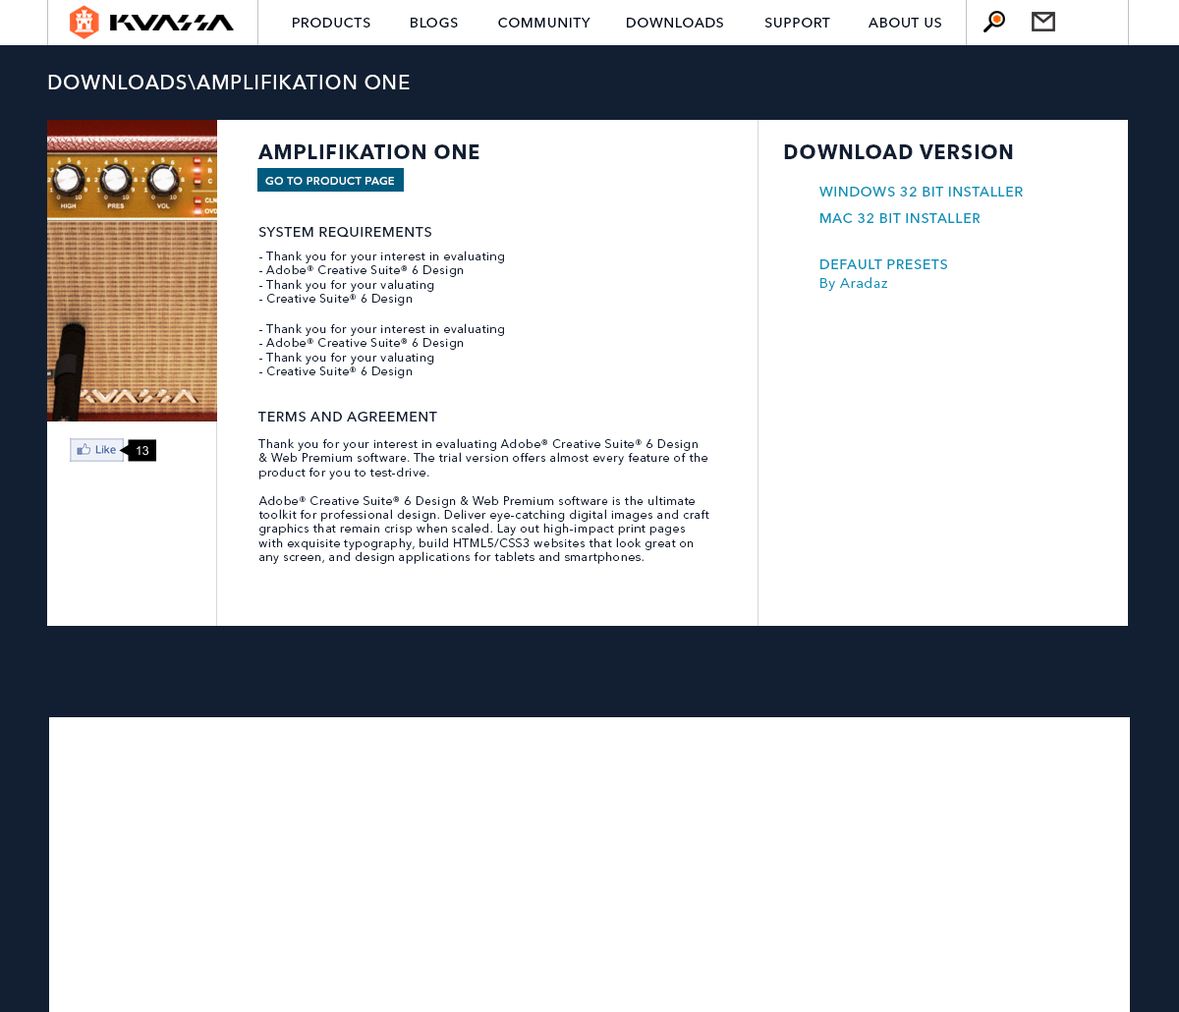
<style>
.page{position:relative;width:1179px;height:1012px;background:#ffffff}
.page>*{position:absolute;margin:0}
.t1{font:13.8px "AvenirNextLTPro-Medium";letter-spacing:0.05em;color:#010d1e}
.t2{font:19.6px "AvenirNextLTPro-Medium";letter-spacing:0.05em;color:#ffffff}
.t3{font:19.6px "AvenirNextLTPro-Bold";letter-spacing:0.05em;color:#121e32}
.t4{font:10.8px "AvenirNextLTPro-Medium";letter-spacing:0.05em;color:#ffffff}
.t5{font:13.8px "AvenirNextLTPro-Medium";letter-spacing:0.05em;color:#0a92b9}
.t6{font:13.8px "AvenirNextLTPro-Medium";letter-spacing:0.05em;color:#121e32}
.t7{font:11.8px "AvenirNextLTPro-Regular";letter-spacing:0.05em;color:#121e32}
.t8{font:13.8px "AvenirNextLTPro-Regular";letter-spacing:0.05em;color:#0a92b9}
</style>
<div class="page">
<p class="t1" style="left:293px;top:18px;width:77px;height:10px">PRODUCTS</p>
<p class="t1" style="left:411px;top:18px;width:47px;height:10px">BLOGS</p>
<p class="t1" style="left:498px;top:18px;width:92px;height:10px">COMMUNITY</p>
<p class="t1" style="left:627px;top:18px;width:96px;height:10px">DOWNLOADS</p>
<p class="t1" style="left:764px;top:18px;width:66px;height:10px">SUPPORT</p>
<p class="t1" style="left:868px;top:18px;width:73px;height:10px">ABOUT US</p>
<p class="t2" style="left:48px;top:74px;width:362px;height:16px">DOWNLOADS\AMPLIFIKATION ONE</p>
<p class="t3" style="left:257px;top:144px;width:222px;height:15px">AMPLIFIKATION ONE</p>
<p class="t3" style="left:784px;top:144px;width:229px;height:15px">DOWNLOAD VERSION</p>
<p class="t4" style="left:265px;top:177px;width:129px;height:8px">GO TO PRODUCT PAGE</p>
<p class="t5" style="left:819px;top:187px;width:203px;height:9px">WINDOWS 32 BIT INSTALLER</p>
<p class="t5" style="left:820px;top:213px;width:160px;height:10px">MAC 32 BIT INSTALLER</p>
<p class="t6" style="left:258px;top:227px;width:173px;height:10px">SYSTEM REQUIREMENTS</p>
<p class="t7" style="left:259px;top:250px;width:245px;height:55px">- Thank you for your interest in evaluating <br>- Adobe® Creative Suite® 6 Design<br>- Thank you for your valuating <br>- Creative Suite® 6 Design</p>
<p class="t5" style="left:820px;top:259px;width:127px;height:10px">DEFAULT PRESETS</p>
<p class="t8" style="left:820px;top:277px;width:67px;height:14px">By Aradaz</p>
<p class="t7" style="left:259px;top:323px;width:245px;height:55px">- Thank you for your interest in evaluating <br>- Adobe® Creative Suite® 6 Design<br>- Thank you for your valuating <br>- Creative Suite® 6 Design</p>
<p class="t6" style="left:257px;top:412px;width:180px;height:9px">TERMS AND AGREEMENT</p>
<p class="t7" style="left:258px;top:438px;width:451px;height:126px">Thank you for your interest in evaluating Adobe® Creative Suite® 6 Design &amp; Web Premium software. The trial version offers almost every feature of the product for you to test-drive. <br><br>Adobe® Creative Suite® 6 Design &amp; Web Premium software is the ultimate toolkit for professional design. Deliver eye-catching digital images and craft graphics that remain crisp when scaled. Lay out high-impact print pages with exquisite typography, build HTML5/CSS3 websites that look great on any screen, and design applications for tablets and smartphones.</p>
</div>
